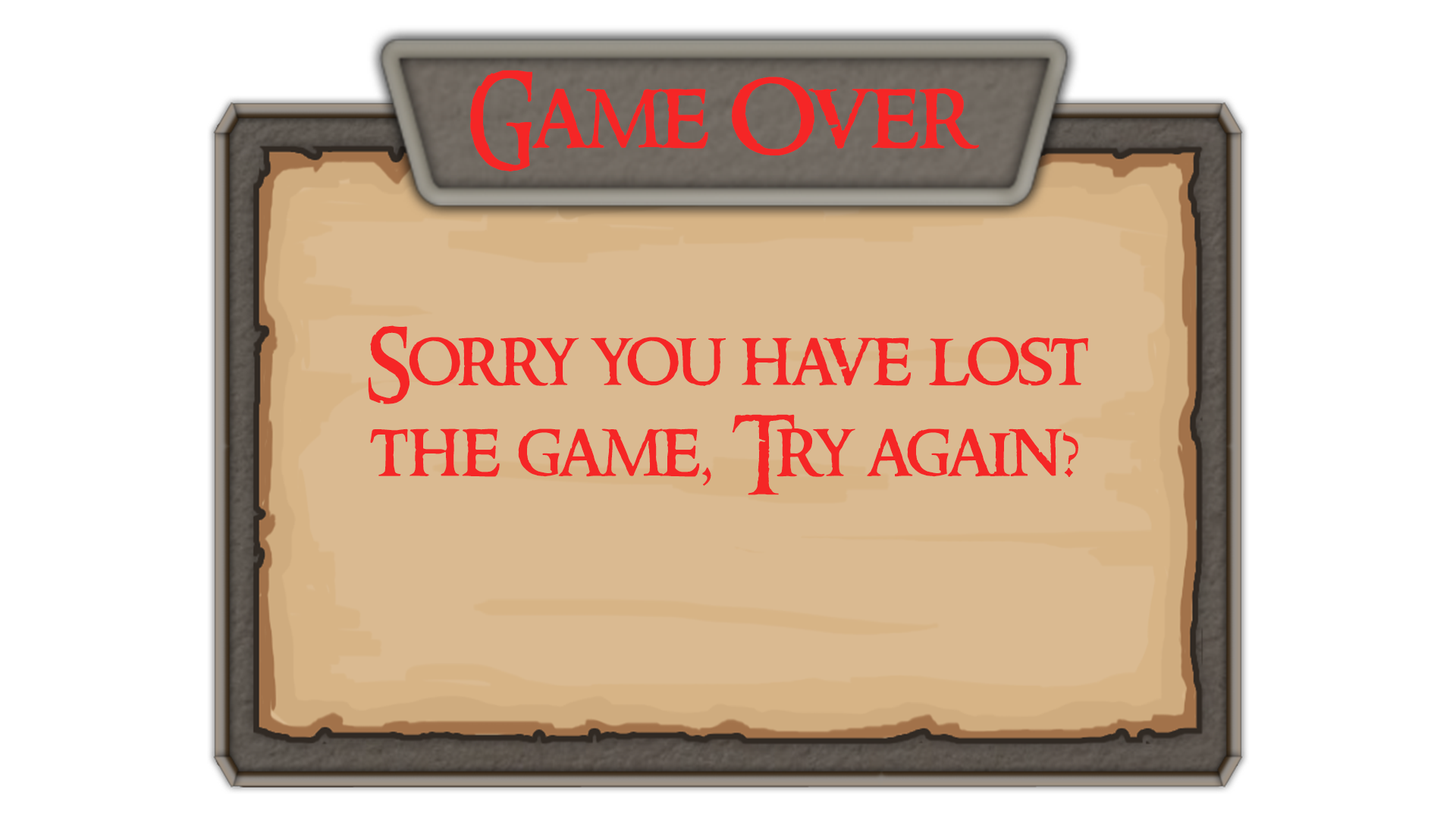
<style>
.page{position:relative;width:1456px;height:819px;background:#ffffff}
.page>*{position:absolute;margin:0}
.t1{font:94.8px "RingbearerMedium";color:#f52626}
.t2{font:75.8px "RingbearerMedium";color:#f52626}
</style>
<div class="page">
<p class="t1" style="left:470px;top:70px;width:509px;height:101px">Game Over</p>
<p class="t2" style="left:368px;top:325px;width:721px;height:170px;text-align:center">Sorry you have lost<br>the game, Try again?</p>
</div>
